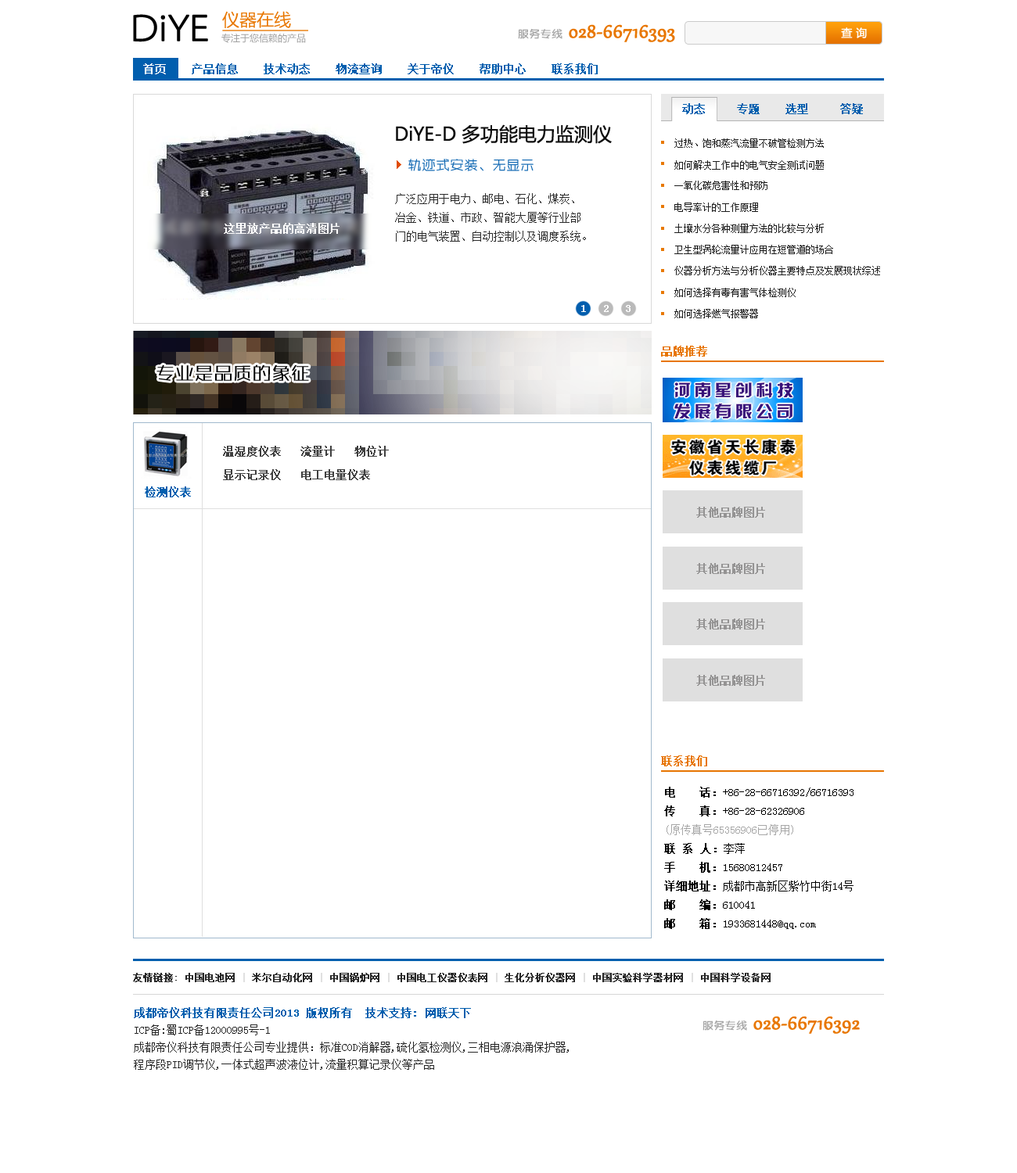
<style>
.page{position:relative;width:1017px;height:1173px;background:#ffffff}
.page>*{position:absolute;margin:0}
.t1{font:37.5px "ZHSRXT--GBK1-0";color:#000000;font-weight:bold}
.t2{font:17.2px "MicrosoftYaHei";color:#e87702}
.t3{font:23.5px "Gabriola";color:#e87702;font-weight:bold}
.t4{font:10.9px "ZHSRXT--GBK1-0";color:#a5a5a5;font-weight:bold}
.t5{font:10.9px "MicrosoftYaHei";color:#ffffff;font-weight:bold}
.t6{font:9.4px "MicrosoftYaHei";color:#a1a1a1}
.t7{font:10.9px "SimSun";color:#015eae;font-weight:bold}
.t8{font:10.9px "SimSun";color:#ffffff;font-weight:bold}
.t9{font:18.8px "MicrosoftYaHei";color:#0c0c0c}
.t10{font:9.4px "SimSun";color:#1d1d1d}
.t11{font:14.1px "ZHSRXT--GBK1-0";color:#015eae}
.t12{font:10.9px/18.8px "SimSun";color:#2c2c2c}
.t13{font:10.9px "SimSun";color:#e77501;font-weight:bold}
.t14{font:18.8px "ZHSRXT--GBK1-0";color:#000000;font-weight:bold}
.t15{font:10.9px/23.5px "SimSun";color:#3f3f3f;font-weight:bold}
.t16{font:10.9px/18.8px "SimSun";color:#000000}
.t17{font:10.9px/18.8px "SimSun";color:#000000;font-weight:bold}
.t18{font:10.9px/18.8px "SimSun";color:#a7a7a7}
.t19{font:9.4px "SimSun";color:#272727;font-weight:bold}
.t20{font:9.4px "SimSun";color:#e0e0e0;font-weight:bold}
.t21{font:10.9px/17.2px "SimSun";color:#272727}
.t22{font:10.9px/17.2px "SimSun";color:#015eae;font-weight:bold}
</style>
<div class="page">
<p class="t1" style="left:133px;top:14px;width:75px;height:28px">DiYE</p>
<p class="t2" style="left:222px;top:11px;width:69px;height:17px">仪器在线</p>
<p class="t3" style="left:518px;top:24px;width:157px;height:18px"><span class="t4">服务专线 </span>028-66716393</p>
<p class="t5" style="left:841px;top:27px;width:25px;height:11px">查 询</p>
<p class="t6" style="left:221px;top:34px;width:85px;height:9px">专注于您信赖的产品</p>
<p class="t7" style="left:143px;top:63px;width:454px;height:11px"><span class="t8">首页    </span>产品信息    技术动态    物流查询    关于帝仪    帮助中心    联系我们</p>
<p class="t7" style="left:682px;top:103px;width:181px;height:11px">动态     专题    选型     答疑</p>
<p class="t9" style="left:396px;top:124px;width:216px;height:20px">DiYE-D 多功能电力监测仪</p>
<p class="t10" style="left:674px;top:138px;width:149px;height:10px">过热、饱和蒸汽流量不破管检测方法</p>
<p class="t11" style="left:408px;top:159px;width:125px;height:12px">轨迹式安装、无显示</p>
<p class="t10" style="left:674px;top:160px;width:149px;height:10px">如何解决工作中的电气安全测试问题</p>
<p class="t10" style="left:674px;top:181px;width:93px;height:9px">一氧化碳危害性和预防</p>
<p class="t12" style="left:395px;top:193px;width:191px;height:49px">广泛应用于电力、邮电、石化、煤炭、<br>冶金、铁道、市政、智能大厦等行业部<br>门的电气装置、自动控制以及调度系统。</p>
<p class="t10" style="left:674px;top:203px;width:84px;height:9px">电导率计的工作原理</p>
<p class="t8" style="left:224px;top:223px;width:115px;height:11px">这里放产品的高清图片</p>
<p class="t10" style="left:674px;top:224px;width:149px;height:9px">土壤水分各种测量方法的比较与分析</p>
<p class="t10" style="left:674px;top:245px;width:159px;height:9px">卫生型涡轮流量计应用在短管道的场合</p>
<p class="t10" style="left:674px;top:266px;width:206px;height:9px">仪器分析方法与分析仪器主要特点及发展现状综述</p>
<p class="t10" style="left:674px;top:288px;width:121px;height:9px">如何选择有毒有害气体检测仪</p>
<p class="t8" style="left:581px;top:305px;width:5px;height:7px">1</p>
<p class="t8" style="left:604px;top:305px;width:4px;height:7px">2</p>
<p class="t8" style="left:626px;top:305px;width:4px;height:7px">3</p>
<p class="t10" style="left:674px;top:309px;width:84px;height:9px">如何选择燃气报警器</p>
<p class="t13" style="left:661px;top:346px;width:46px;height:11px">品牌推荐</p>
<p class="t14" style="left:156px;top:364px;width:153px;height:17px">专业是品质的象征</p>
<p class="t15" style="left:223px;top:446px;width:166px;height:34px">温湿度仪表   流量计   物位计    <br>显示记录仪   电工电量仪表</p>
<p class="t7" style="left:145px;top:486px;width:46px;height:11px">检测仪表</p>
<p class="t13" style="left:661px;top:755px;width:46px;height:11px">联系我们</p>
<p class="t16" style="left:664px;top:787px;width:189px;height:142px"><span class="t17">电　　话：</span>+86-28-66716392/66716393<br><span class="t17">传　　真：</span>+86-28-62326906<br><span class="t18">(原传真号65356906已停用)<br></span><span class="t17">联 系 人：</span>李萍<br><span class="t17">手　　机：</span>15680812457<br><span class="t17">详细地址：</span>成都市高新区紫竹中街14号<br><span class="t17">邮　　编：</span>610041<br><span class="t17">邮　　箱：</span>1933681448@qq.com</p>
<p class="t19" style="left:133px;top:973px;width:637px;height:9px">友情链接: 中国电池网<span class="t20"> | </span>米尔自动化网<span class="t20"> | </span>中国锅炉网<span class="t20"> | </span>中国电工仪器仪表网<span class="t20"> | </span>生化分析仪器网<span class="t20"> | </span>中国实验科学器材网<span class="t20"> | </span>中国科学设备网</p>
<p class="t21" style="left:134px;top:1007px;width:435px;height:63px"><span class="t22">成都帝仪科技有限责任公司2013 版权所有  技术支持: 网联天下</span> <br>ICP备:蜀ICP备12000995号-1<br>成都帝仪科技有限责任公司专业提供：标准COD消解器,硫化氢检测仪,三相电源浪涌保护器,<br>程序段PID调节仪,一体式超声波液位计,流量积算记录仪等产品</p>
<p class="t3" style="left:702px;top:1016px;width:157px;height:18px"><span class="t4">服务专线 </span>028-66716392</p>
</div>
